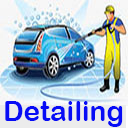
<style>
.page{position:relative;width:128px;height:128px}
.page>*{position:absolute;margin:0}
.t1{font:28px "ArialRoundedMTBold";color:#070cf5}
</style>
<div class="page">
<p class="t1" style="left:5px;top:101px;width:118px;height:26px">Detailing</p>
</div>
